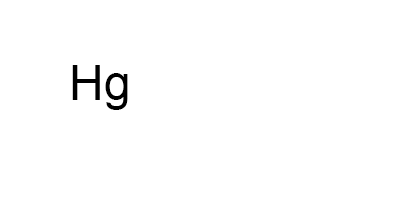
<style>
.page{position:relative;width:400px;height:200px;background:#ffffff}
.page>*{position:absolute;margin:0}
.t1{font:48px "ArialMT";color:#000000}
</style>
<div class="page">
<p class="t1" style="left:72px;top:65px;width:56px;height:45px">Hg</p>
</div>
